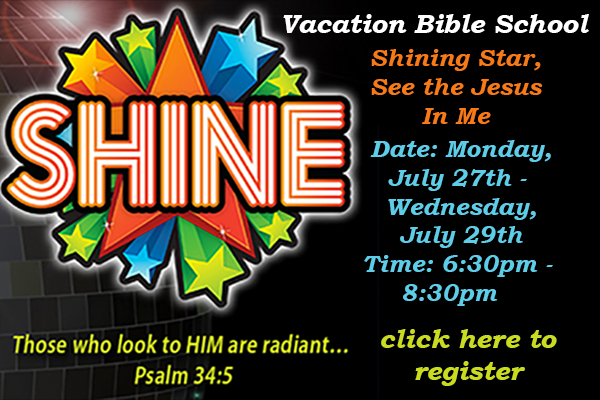
<style>
.page{position:relative;width:600px;height:400px;background:#000000}
.page>*{position:absolute;margin:0}
.t1{font:26.7px "BookmanOldStyle-BoldItalic";color:#ffffff}
.t2{font:24px "BookmanOldStyle-BoldItalic";color:#f77a18}
.t3{font:24px "BookmanOldStyle-BoldItalic";color:#5ecde8}
.t4{font:26.7px "BookmanOldStyle-BoldItalic";color:#c9dc22}
</style>
<div class="page">
<p class="t1" style="left:283px;top:14px;width:306px;height:19px">Vacation Bible School</p>
<p class="t2" style="left:371px;top:49px;width:172px;height:75px;text-align:center">Shining Star, <br>See the Jesus <br>In Me</p>
<p class="t3" style="left:364px;top:140px;width:189px;height:166px;text-align:center">Date: Monday,<br>July 27th - <br>Wednesday,<br>July 29th<br>Time: 6:30pm - <br>8:30pm</p>
<p class="t4" style="left:381px;top:329px;width:176px;height:57px;text-align:center">click here to<br>register</p>
</div>
